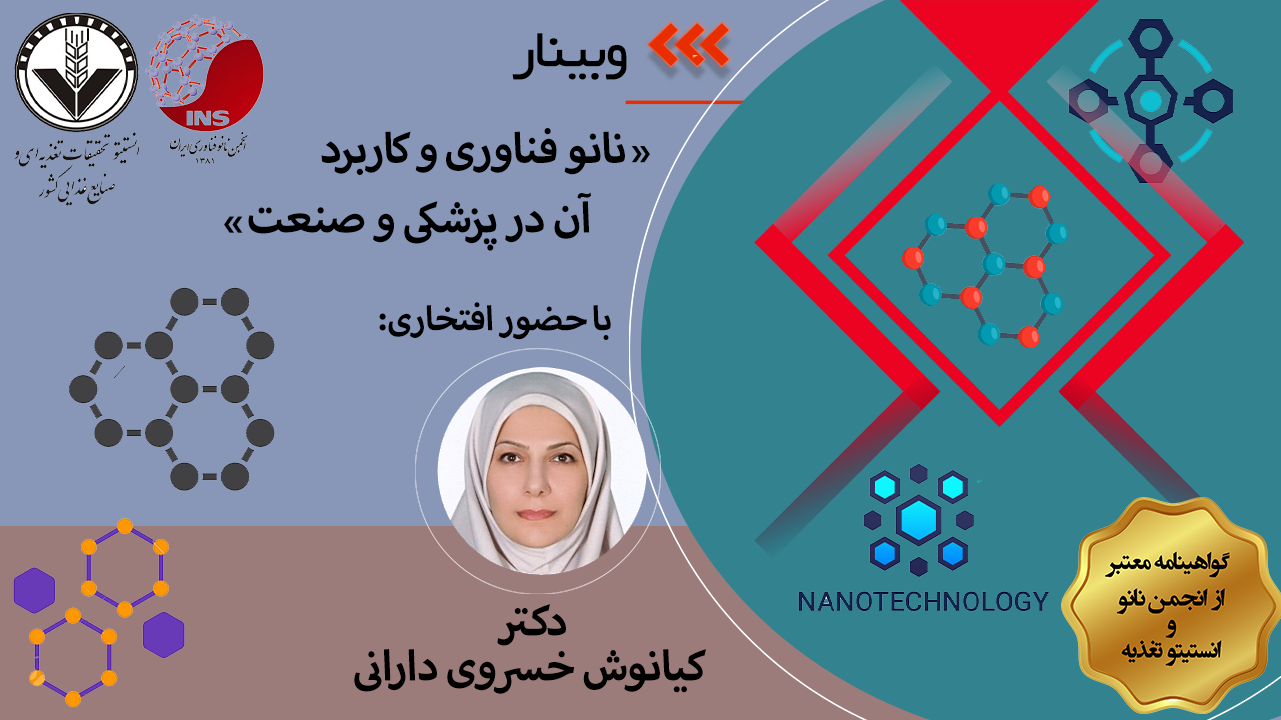
<style>
.page{position:relative;width:1281px;height:720px;background:#328290}
.page>*{position:absolute;margin:0}
.t1{font:60px "Sp_Soroosh";letter-spacing:-0.02em;color:#000000}
.t2{font:60px "MyriadArabic-Bold";letter-spacing:-0.02em;color:#000000}
.t3{font:48px "MyriadArabic-Bold";letter-spacing:-0.02em;color:#000000}
</style>
<div class="page">
<p class="t1" style="left:512px;top:33px;width:115px;height:47px">وبینار</p>
<p class="t2" style="left:321px;top:128px;width:304px;height:47px">نانو فناوری و کاربرد</p>
<p class="t2" style="left:631px;top:146px;width:19px;height:17px">«</p>
<p class="t2" style="left:248px;top:192px;width:343px;height:59px">آن در پزشکی و صنعت</p>
<p class="t2" style="left:224px;top:216px;width:19px;height:17px">»</p>
<p class="t3" style="left:379px;top:302px;width:232px;height:38px">با حضور افتخاری:</p>
<p class="t2" style="left:497px;top:604px;width:69px;height:42px">دکتر</p>
<p class="t2" style="left:354px;top:649px;width:353px;height:45px">کیانوش خسروی دارانی</p>
</div>
